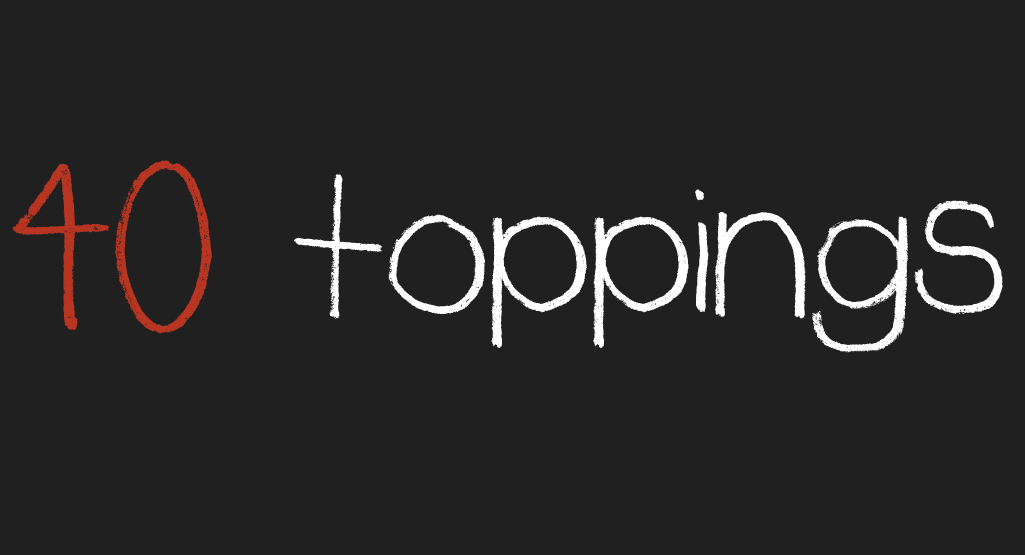
<style>
.page{position:relative;width:1025px;height:555px;background:#202020}
.page>*{position:absolute;margin:0}
.t1{font:233.3px "Rudiment";color:#ffffff}
.t2{font:233.3px "Rudiment";color:#b83521}
</style>
<div class="page">
<p class="t1" style="left:12px;top:160px;width:991px;height:193px"><span class="t2">40 </span>toppings</p>
</div>
